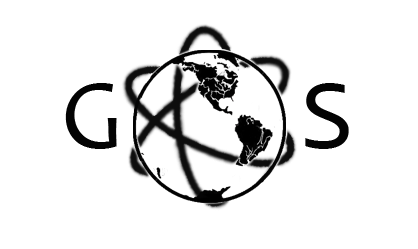
<style>
.page{position:relative;width:418px;height:249px;background:#ffffff}
.page>*{position:absolute;margin:0}
.t1{font:100px "Candara";color:#030303}
.t2{font:100px "Consolas";color:#030303}
</style>
<div class="page">
<p class="t1" style="left:65px;top:83px;width:52px;height:66px">G</p>
<p class="t2" style="left:305px;top:83px;width:44px;height:66px">S</p>
</div>
